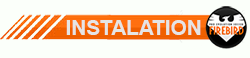
<style>
.page{position:relative;width:250px;height:58px;background:#fbfffa}
.page>*{position:absolute;margin:0}
.t1{font:21px "Arial-BoldMT";color:#e5e5e5}
</style>
<div class="page">
<p class="t1" style="left:66px;top:20px;width:135px;height:15px">INSTALATION</p>
</div>
